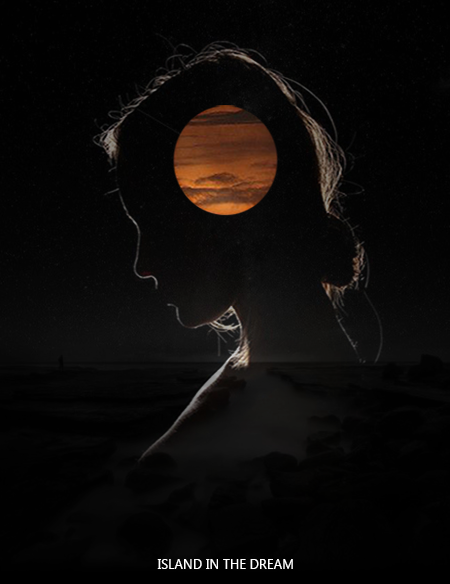
<style>
.page{position:relative;width:450px;height:584px}
.page>*{position:absolute;margin:0}
.t1{font:14px "MicrosoftNewTaiLue";color:#ffffff;scale:0.95 1}
</style>
<div class="page">
<p class="t1" style="left:157px;top:559px;width:136px;height:10px">ISLAND IN THE DREAM</p>
</div>
